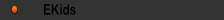
<style>
.page{position:relative;width:224px;height:20px;background:#333333}
.page>*{position:absolute;margin:0}
.t1{font:14.9px "ArialRoundedMTBold";color:#030303;scale:0.78 1}
</style>
<div class="page">
<p class="t1" style="left:44px;top:4px;width:32px;height:11px">EKids</p>
</div>
